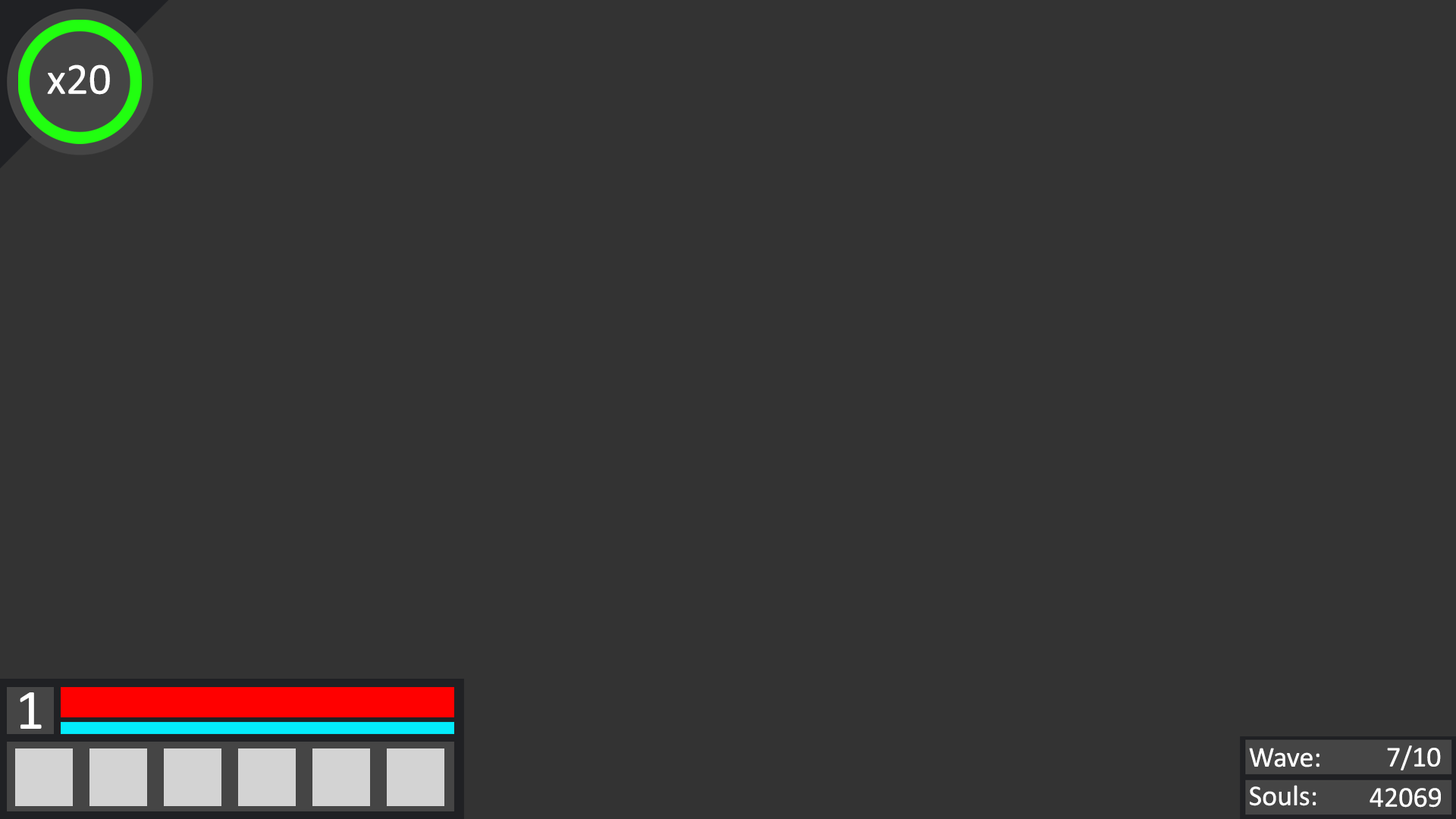
<style>
.page{position:relative;width:1456px;height:819px;background:#333333}
.page>*{position:absolute;margin:0}
.t1{font:44.6px "Calibri";color:#ffffff}
.t2{font:56.9px "Calibri";color:#ffffff}
.t3{font:28.8px "Calibri";color:#ffffff}
</style>
<div class="page">
<p class="t1" style="left:47px;top:64px;width:63px;height:31px">x20</p>
<p class="t2" style="left:20px;top:692px;width:22px;height:37px">1</p>
<p class="t3" style="left:1249px;top:748px;width:70px;height:19px">Wave:</p>
<p class="t3" style="left:1387px;top:745px;width:54px;height:25px">7/10</p>
<p class="t3" style="left:1250px;top:785px;width:66px;height:21px">Souls:</p>
<p class="t3" style="left:1370px;top:788px;width:71px;height:20px">42069</p>
</div>
